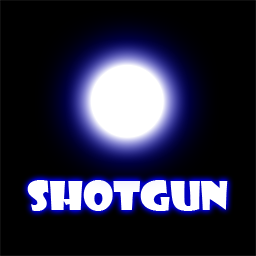
<style>
.page{position:relative;width:256px;height:256px;background:#000000}
.page>*{position:absolute;margin:0}
.t1{font:38.1px "ShowcardGothic-Reg";color:#ffffff;scale:1.14 1}
</style>
<div class="page">
<p class="t1" style="left:27px;top:180px;width:201px;height:31px">SHOTGUN</p>
</div>
